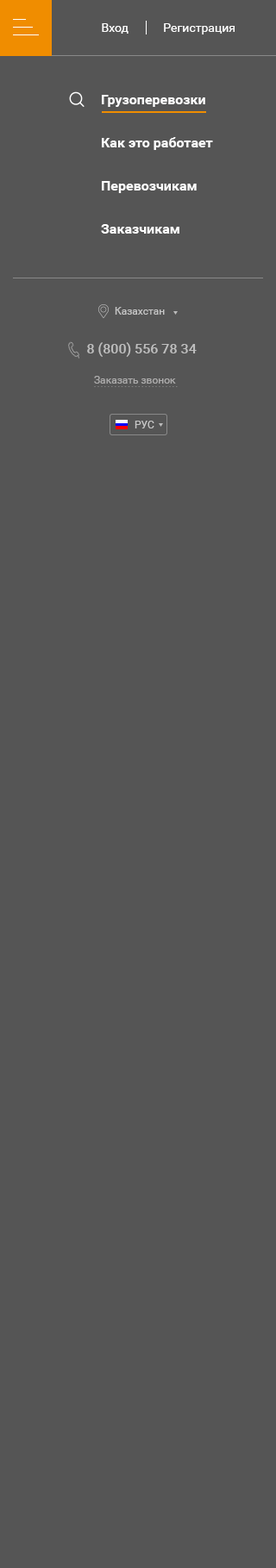
<style>
.page{position:relative;width:276px;height:1568px;background:#555555}
.page>*{position:absolute;margin:0}
.t1{font:12.1px "Roboto-Regular";color:#ffffff}
.t2{font:13.8px/34.5px "Roboto-Bold";color:#ffffff}
.t3{font:10.3px "Roboto-Regular";color:#c6c6c6}
.t4{font:13.8px "Roboto-Medium";color:#bfbfbf}
.t5{font:10.3px "Roboto-Regular";color:#aeadad}
.t6{font:10.3px "Pragmatica";color:#808080}
</style>
<div class="page">
<p class="t1" style="left:102px;top:23px;width:26px;height:11px">Вход</p>
<p class="t1" style="left:164px;top:23px;width:70px;height:11px">Регистрация</p>
<p class="t2" style="left:101px;top:95px;width:112px;height:139px">Грузоперевозки<br>Как это работает<br>Перевозчикам<br>Заказчикам</p>
<p class="t3" style="left:115px;top:307px;width:50px;height:8px">Казахстан</p>
<p class="t4" style="left:87px;top:342px;width:110px;height:15px">8 (800) 556 78 34</p>
<p class="t5" style="left:94px;top:376px;width:82px;height:8px">Заказать звонок</p>
<p class="t6" style="left:94px;top:386px;width:84px;height:1px">.........................</p>
<p class="t3" style="left:134px;top:421px;width:20px;height:7px">РУС</p>
</div>
